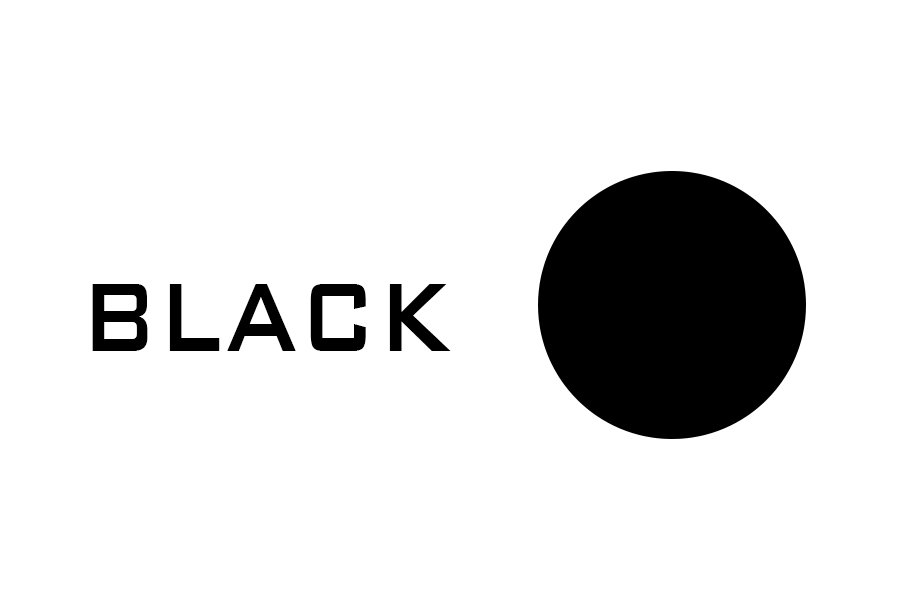
<style>
.page{position:relative;width:900px;height:600px;background:#ffffff}
.page>*{position:absolute;margin:0}
.t1{font:130px "BankGothicBT-Medium";color:#000000;scale:0.75 1}
</style>
<div class="page">
<p class="t1" style="left:92px;top:284px;width:359px;height:67px">BLACK</p>
</div>
